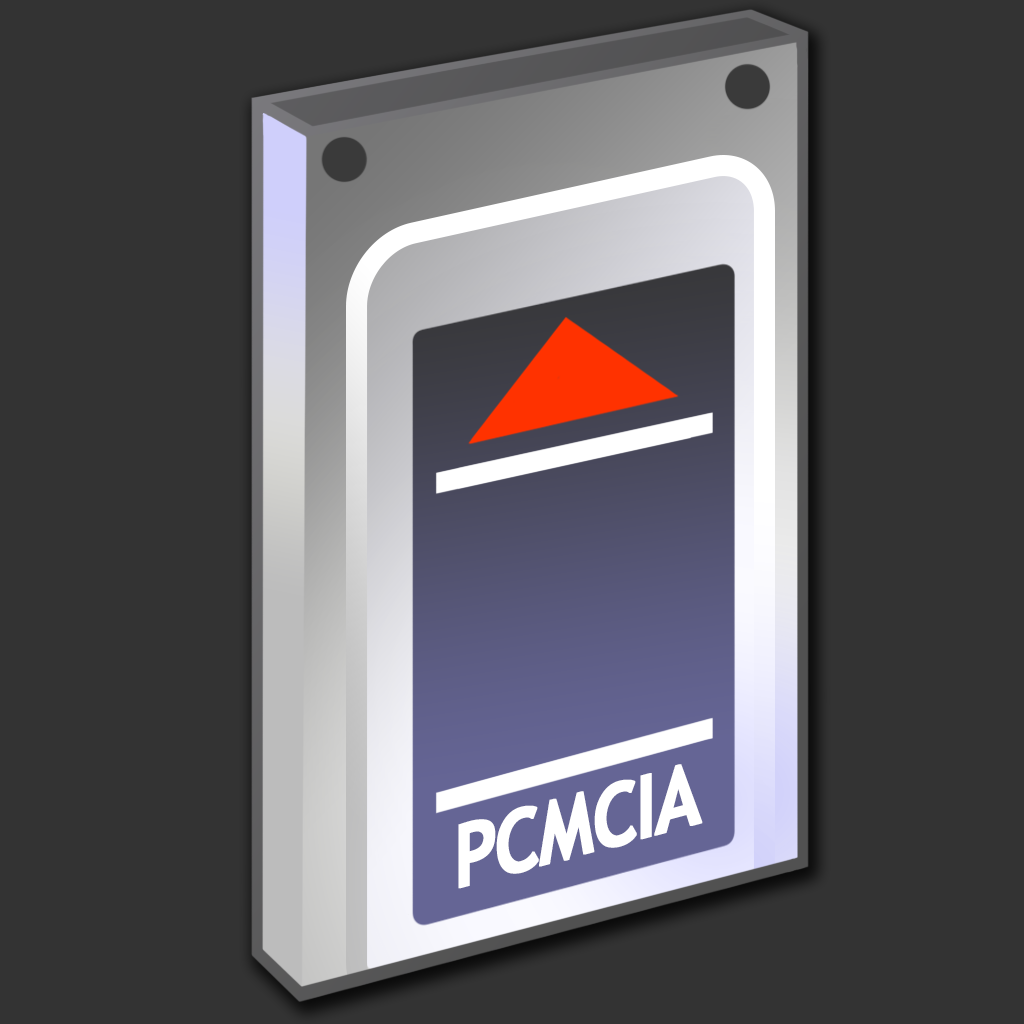
<style>
.page{position:relative;width:1024px;height:1024px;background:#333333}
.page>*{position:absolute;margin:0}
.t1{font:86.7px "TrebuchetMS-Bold";letter-spacing:-0.045em;color:#ffffff;font-weight:bold;scale:0.88 1}
</style>
<div class="page">
<p class="t1" style="left:458px;top:764px;width:245px;height:125px;rotate:-15deg">PCMCIA</p>
</div>
